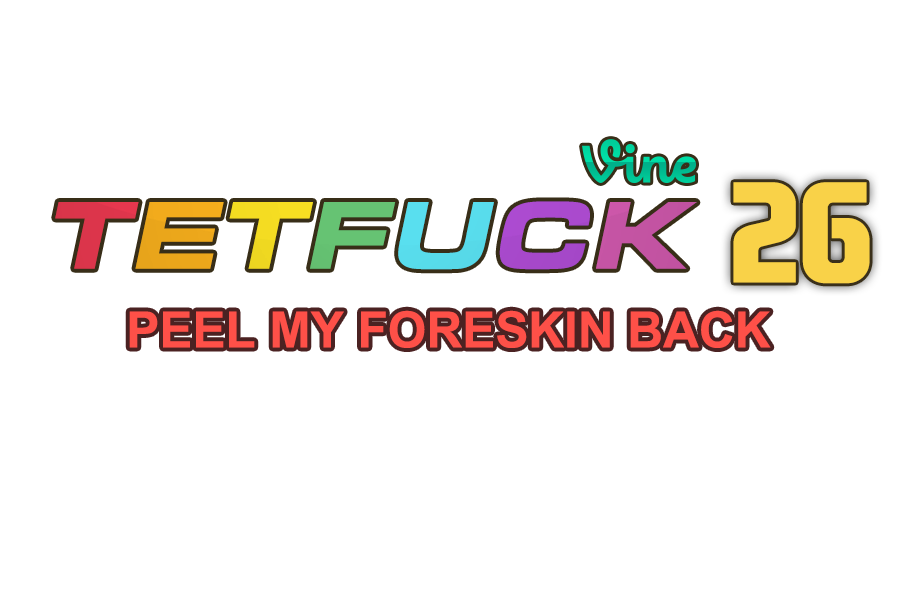
<style>
.page{position:relative;width:900px;height:600px;background:#ffffff}
.page>*{position:absolute;margin:0}
.t1{font:142.8px "EASansCurves-Regular";color:#f9d146}
.t2{font:50px "Arial-BoldMT";color:#fe4e46}
</style>
<div class="page">
<p class="t1" style="left:733px;top:182px;width:137px;height:102px">26</p>
<p class="t2" style="left:129px;top:310px;width:642px;height:38px">PEEL MY FORESKIN BACK</p>
</div>
